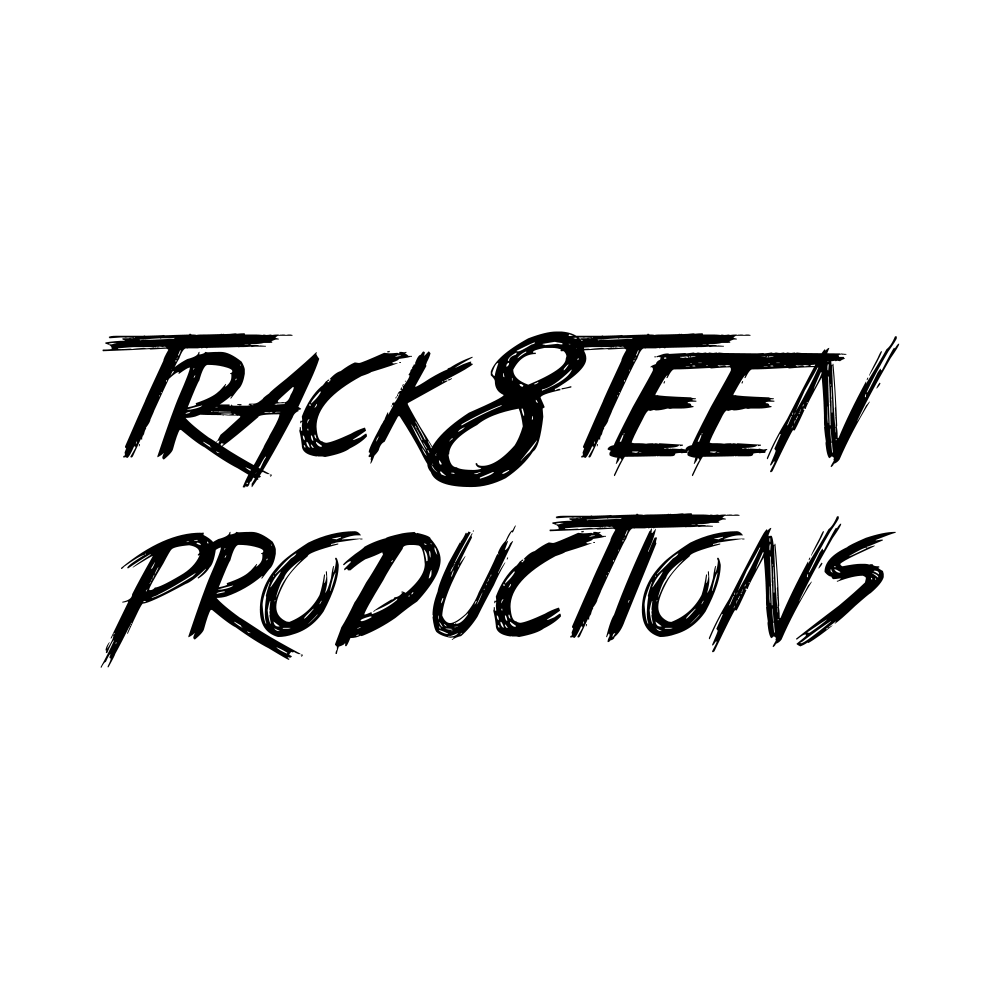
<style>
.page{position:relative;width:1000px;height:1000px;background:#ffffff}
.page>*{position:absolute;margin:0}
.t1{font:150px "TrueLies";color:#000000}
</style>
<div class="page">
<p class="t1" style="left:100px;top:331px;width:800px;height:337px">track8teen<br>productions</p>
</div>
